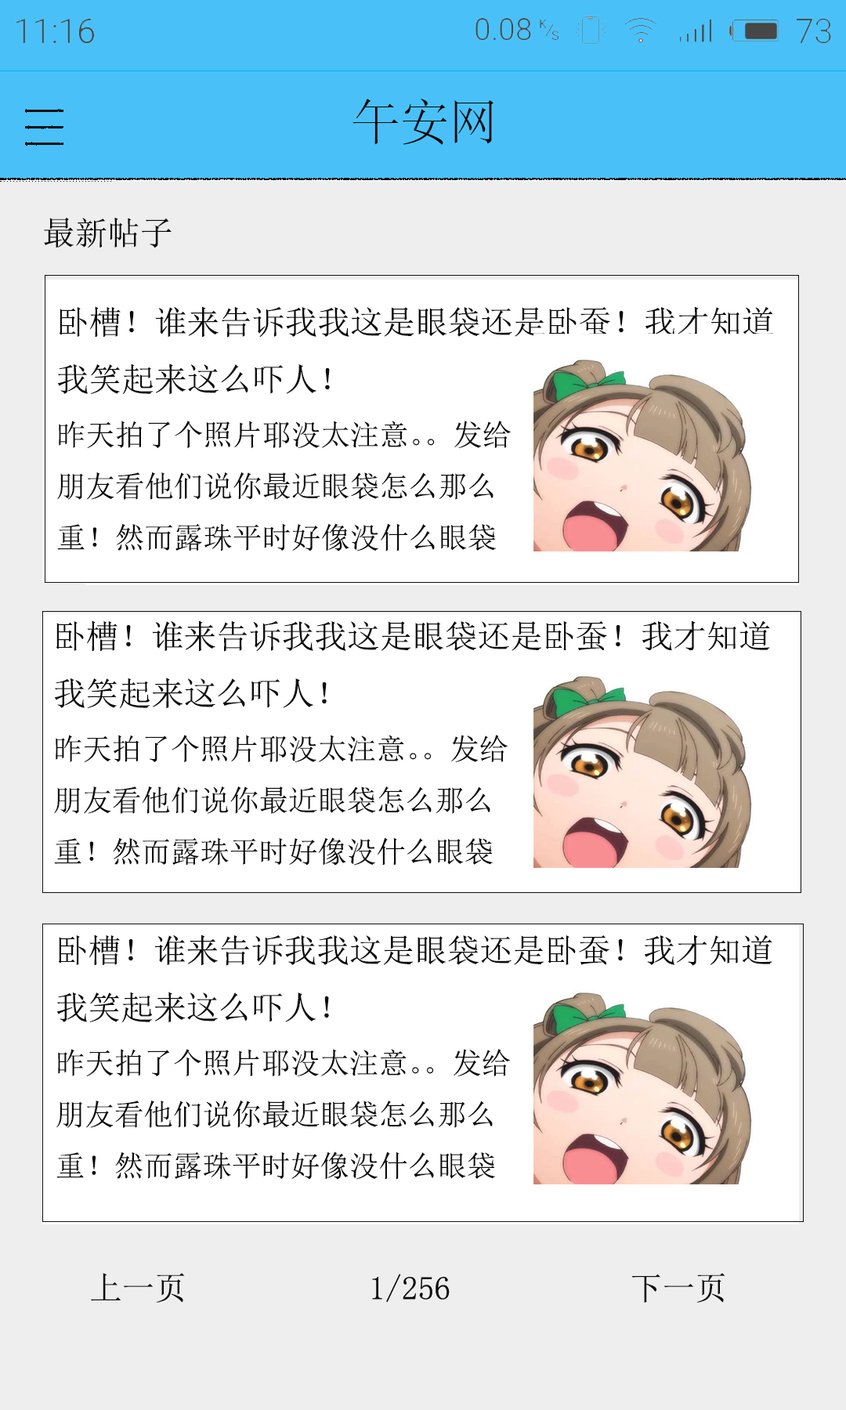
<style>
.page{position:relative;width:846px;height:1410px;background:#ffffff}
.page>*{position:absolute;margin:0}
.t1{font:48.9px "STSong";color:#070707}
.t2{font:32.6px "SimSun";color:#0c0c0c}
.t3{font:29.4px "SimSun";color:#0c0c0c}
.t4{font:32.6px "SimSun";color:#0b0b0b}
</style>
<div class="page">
<p class="t1" style="left:352px;top:99px;width:141px;height:46px">午安网</p>
<p class="t2" style="left:44px;top:217px;width:128px;height:31px">最新帖子</p>
<p class="t3" style="left:57px;top:306px;width:716px;height:245px"><span class="t2">卧槽！谁来告诉我我这是眼袋还是卧蚕！我才知道<br>我笑起来这么吓人！<br></span>昨天拍了个照片耶没太注意。。发给<br>朋友看他们说你最近眼袋怎么那么<br>重！然而露珠平时好像没什么眼袋</p>
<p class="t3" style="left:54px;top:620px;width:716px;height:245px"><span class="t2">卧槽！谁来告诉我我这是眼袋还是卧蚕！我才知道<br>我笑起来这么吓人！<br></span>昨天拍了个照片耶没太注意。。发给<br>朋友看他们说你最近眼袋怎么那么<br>重！然而露珠平时好像没什么眼袋</p>
<p class="t3" style="left:56px;top:934px;width:716px;height:245px"><span class="t2">卧槽！谁来告诉我我这是眼袋还是卧蚕！我才知道<br>我笑起来这么吓人！<br></span>昨天拍了个照片耶没太注意。。发给<br>朋友看他们说你最近眼袋怎么那么<br>重！然而露珠平时好像没什么眼袋</p>
<p class="t4" style="left:90px;top:1273px;width:95px;height:29px">上一页</p>
<p class="t4" style="left:631px;top:1273px;width:94px;height:29px">下一页</p>
</div>
